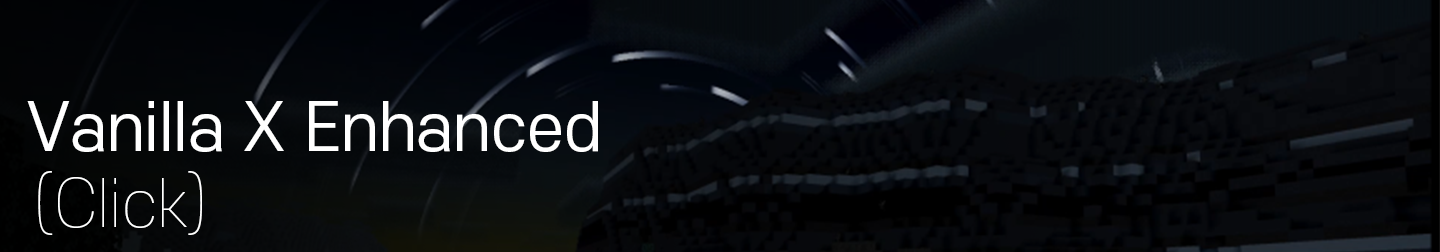
<style>
.page{position:relative;width:1440px;height:252px}
.page>*{position:absolute;margin:0}
.t1{font:64px "S-CoreDream-4Regular";color:#ffffff}
.t2{font:64px "S-CoreDream-1Thin";color:#ffffff}
</style>
<div class="page">
<p class="t1" style="left:27px;top:101px;width:571px;height:51px">Vanilla X Enhanced</p>
<p class="t2" style="left:38px;top:171px;width:164px;height:64px">(Click)</p>
</div>
